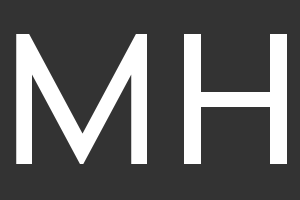
<style>
.page{position:relative;width:300px;height:200px;background:#333333}
.page>*{position:absolute;margin:0}
.t1{font:179.7px "ZeitungPro-Regular";color:#ffffff}
</style>
<div class="page">
<p class="t1" style="left:16px;top:34px;width:271px;height:130px">MH</p>
</div>
